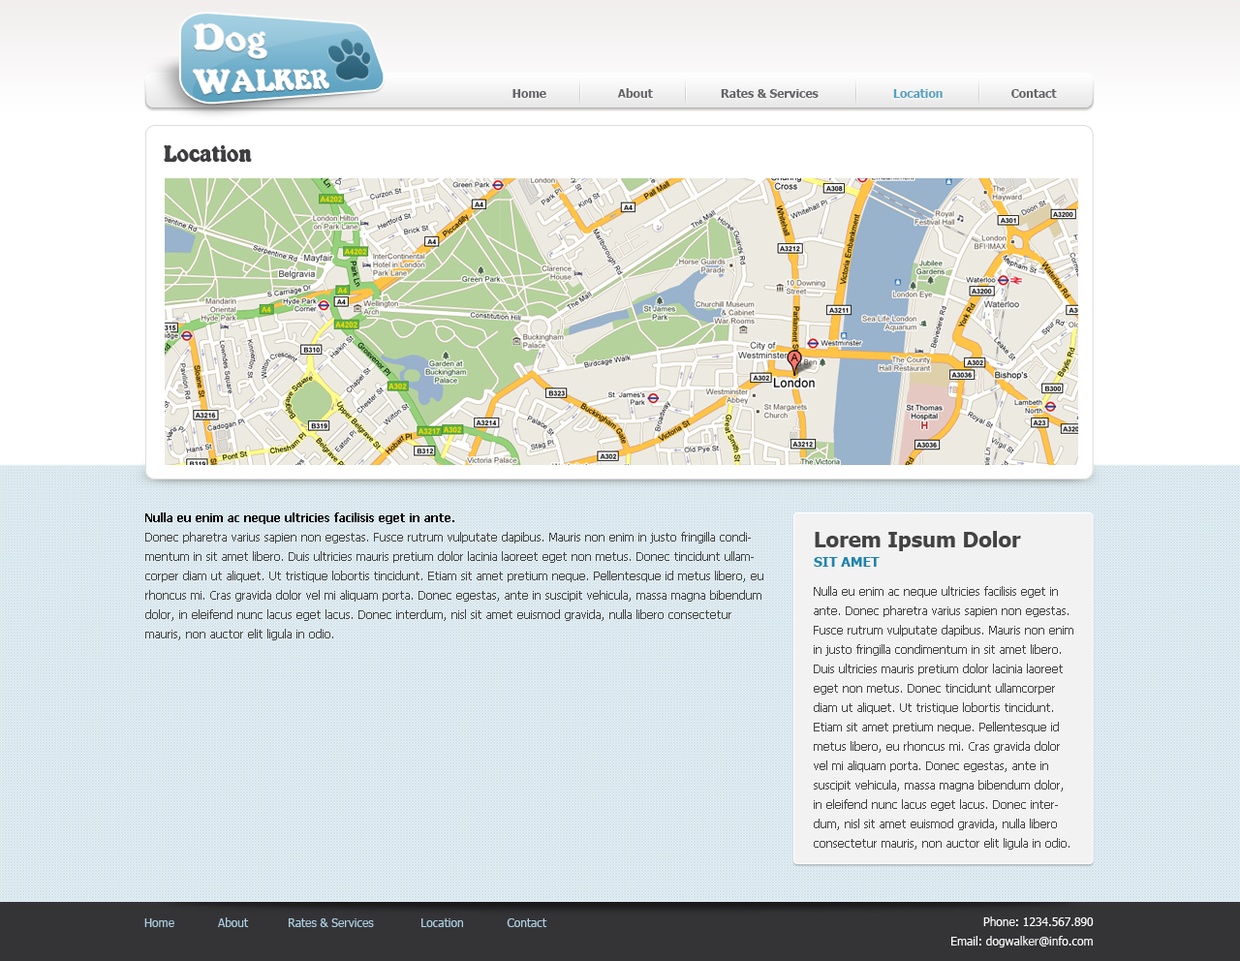
<style>
.page{position:relative;width:1240px;height:961px}
.page>*{position:absolute;margin:0}
.t1{font:11.6px "Tahoma-Bold";color:#656568}
.t2{font:11.6px "Tahoma-Bold";color:#59a0bf}
.t3{font:25.2px "KabarettSimple-Thin";color:#3e3e40}
.t4{font:11.6px/19.4px "Tahoma";color:#444343}
.t5{font:11.6px/19.4px "Tahoma-Bold";color:#000000}
.t6{font:21.3px/19.4px "Tahoma-Bold";color:#444343}
.t7{font:13.6px/19.4px "Tahoma-Bold";color:#1e83af;text-transform:uppercase}
.t8{font:11.6px "Tahoma";color:#acd0e3}
.t9{font:11.6px/19.4px "Tahoma";color:#ffffff}
</style>
<div class="page">
<p class="t1" style="left:513px;top:88px;width:544px;height:10px">Home                     About                    Rates &amp; Services                      <span class="t2">Location  </span>                  Contact</p>
<p class="t3" style="left:164px;top:145px;width:88px;height:17px">Location</p>
<p class="t4" style="left:145px;top:513px;width:619px;height:128px"><span class="t5">Nulla eu enim ac neque ultricies facilisis eget in ante. <br></span>Donec pharetra varius sapien non egestas. Fusce rutrum vulputate dapibus. Mauris non enim in justo fringilla condimentum in sit amet libero. Duis ultricies mauris pretium dolor lacinia laoreet eget non metus. Donec tincidunt ullamcorper diam ut aliquet. Ut tristique lobortis tincidunt. Etiam sit amet pretium neque. Pellentesque id metus libero, eu rhoncus mi. Cras gravida dolor vel mi aliquam porta. Donec egestas, ante in suscipit vehicula, massa magna bibendum dolor, in eleifend nunc lacus eget lacus. Donec interdum, nisl sit amet euismod gravida, nulla libero consectetur mauris, non auctor elit ligula in odio.</p>
<p class="t6" style="left:814px;top:531px;width:207px;height:36px">Lorem Ipsum Dolor<br><span class="t7">sit amet</span></p>
<p class="t4" style="left:814px;top:586px;width:260px;height:264px">Nulla eu enim ac neque ultricies facilisis eget in ante. Donec pharetra varius sapien non egestas. Fusce rutrum vulputate dapibus. Mauris non enim in justo fringilla condimentum in sit amet libero. Duis ultricies mauris pretium dolor lacinia laoreet eget non metus. Donec tincidunt ullamcorper diam ut aliquet. Ut tristique lobortis tincidunt. Etiam sit amet pretium neque. Pellentesque id metus libero, eu rhoncus mi. Cras gravida dolor vel mi aliquam porta. Donec egestas, ante in suscipit vehicula, massa magna bibendum dolor, in eleifend nunc lacus eget lacus. Donec interdum, nisl sit amet euismod gravida, nulla libero consectetur mauris, non auctor elit ligula in odio.</p>
<p class="t8" style="left:144px;top:918px;width:404px;height:9px">Home            About           Rates &amp; Services             Location            Contact</p>
<p class="t9" style="left:952px;top:917px;width:142px;height:31px;text-align:right">Phone: 1234.567.890<br>Email: dogwalker@info.com</p>
</div>
